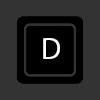
<style>
.page{position:relative;width:100px;height:100px;background:#333333}
.page>*{position:absolute;margin:0}
.t1{font:30px "MyriadPro-Regular";color:#ffffff}
</style>
<div class="page">
<p class="t1" style="left:43px;top:38px;width:17px;height:21px">D</p>
</div>
